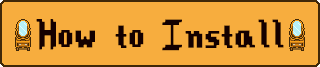
<style>
.page{position:relative;width:320px;height:67px;background:#f7ad3e}
.page>*{position:absolute;margin:0}
.t1{font:48px "Stardew-Valley";color:#140000}
</style>
<div class="page">
<p class="t1" style="left:36px;top:19px;width:248px;height:32px">How to Install</p>
</div>
